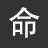
<style>
.page{position:relative;width:48px;height:48px;background:#333333}
.page>*{position:absolute;margin:0}
.t1{font:32px "AdobeHeitiStd-Regular";color:#ffffff}
</style>
<div class="page">
<p class="t1" style="left:9px;top:7px;width:31px;height:31px">命</p>
</div>
